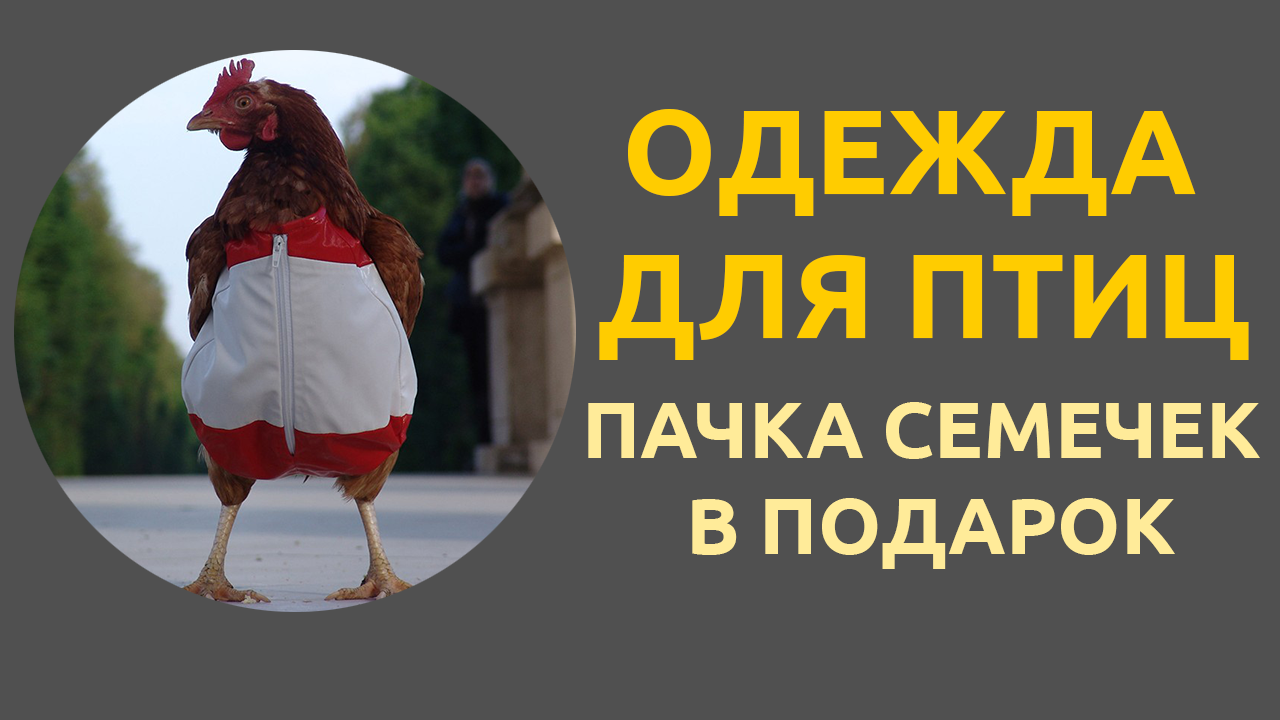
<style>
.page{position:relative;width:1280px;height:720px;background:#505050}
.page>*{position:absolute;margin:0}
.t1{font:120px "Ubuntu-Bold";color:#ffcc00}
.t2{font:80px "Ubuntu-Bold";color:#ffeb99}
</style>
<div class="page">
<p class="t1" style="left:599px;top:109px;width:650px;height:251px;text-align:center">ОДЕЖДА <br>ДЛЯ ПТИЦ</p>
<p class="t2" style="left:588px;top:402px;width:672px;height:167px;text-align:center">ПАЧКА СЕМЕЧЕК <br>В ПОДАРОК</p>
</div>
